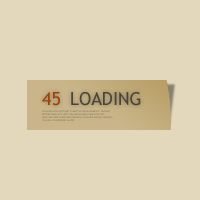
<style>
.page{position:relative;width:200px;height:200px;background:#e3d8bc}
.page>*{position:absolute;margin:0}
.t1{font:18px "TrebuchetMS";color:#a24004;text-transform:uppercase}
.t2{font:18px "TrebuchetMS";color:#49453c;text-transform:uppercase}
.t3{font:2px/3px "TrebuchetMS";text-transform:uppercase}
</style>
<div class="page">
<p class="t1" style="left:42px;top:92px;width:18px;height:14px">45</p>
<p class="t2" style="left:71px;top:92px;width:70px;height:14px">loading</p>
<p class="t3" style="left:42px;top:110px;width:71px;height:11px">Lorem ipsum dolor sit amet, consec tetuer adipiscing elit. Praesent vestibulum molestie lacus. Aenean nonummy hendrerit mauris. Phasellus porta. Fusce sucipit varius mi. Cum sociis natoque penatibus et magnis dis parturient montes<br>, nascetur ridiculus mus. Nulla dui. Fusce feugiat malesuada odio. Morbi nunc odio, gravida at, cursus nec, luctus a, lorem. Maecenas tristique orci ac sem</p>
</div>
